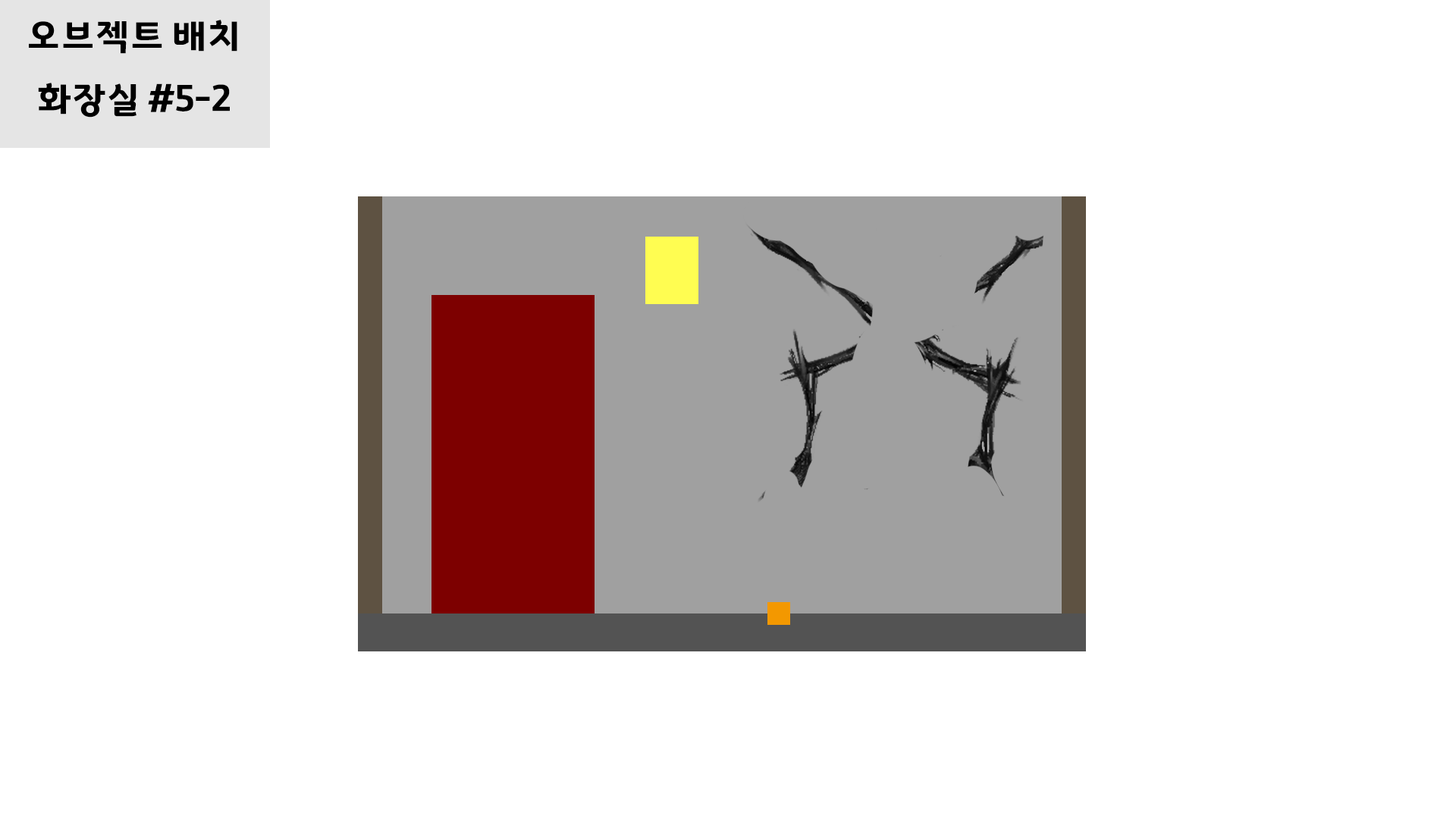
<style>
.page{position:relative;width:1456px;height:819px;background:#ffffff}
.page>*{position:absolute;margin:0}
.t1{font:36.4px "GyeonggiTitleV";letter-spacing:-0.05em;color:#000000}
</style>
<div class="page">
<p class="t1" style="left:29px;top:20px;width:208px;height:34px">오브젝트 배치</p>
<p class="t1" style="left:38px;top:83px;width:192px;height:35px">화장실 #5-2</p>
</div>
